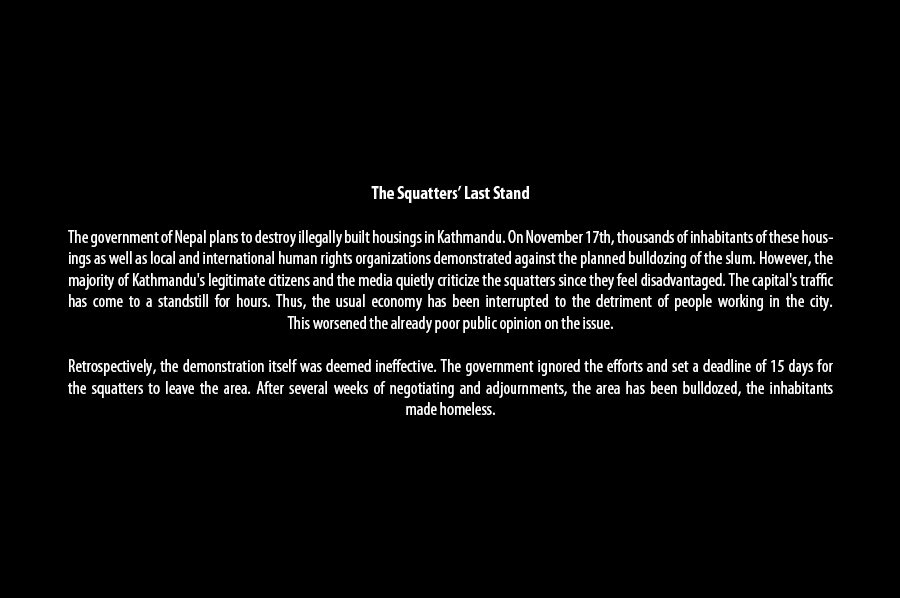
<style>
.page{position:relative;width:900px;height:598px;background:#000000}
.page>*{position:absolute;margin:0}
.t1{font:18px "MyriadPro-Cond";color:#ffffff}
.t2{font:18px "MyriadPro-BoldCond";color:#ffffff}
</style>
<div class="page">
<p class="t1" style="left:68px;top:185px;width:765px;height:230px;text-align:center"><span class="t2">The Squatters’ Last Stand<br></span><br>The government of Nepal plans to destroy illegally built housings in Kathmandu. On November 17th, thousands of inhabitants of these housings as well as local and international human rights organizations demonstrated against the planned bulldozing of the slum. However, the majority of Kathmandu's legitimate citizens and the media quietly criticize the squatters since they feel disadvantaged. The capital's traffic has come to a standstill for hours. Thus, the usual economy has been interrupted to the detriment of people working in the city. <br>This worsened the already poor public opinion on the issue.<br><br>Retrospectively, the demonstration itself was deemed ineffective. The government ignored the efforts and set a deadline of 15 days for <br>the squatters to leave the area. After several weeks of negotiating and adjournments, the area has been bulldozed, the inhabitants <br>made homeless.</p>
</div>
